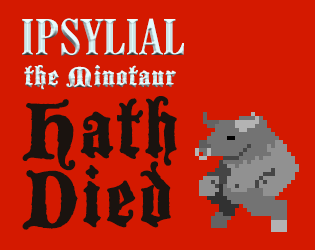
<style>
.page{position:relative;width:315px;height:250px;background:#d41900}
.page>*{position:absolute;margin:0}
.t1{font:50px "CenturySchoolbookW03-BdCnd";letter-spacing:0.025em;color:#def9fc}
.t2{font:30.5px "1BlackmoorLETPlain10";letter-spacing:0.025em;color:#def9fc}
.t3{font:86.2px/68.9px "1BlackmoorLETPlain10";letter-spacing:0.025em;color:#1a130f}
</style>
<div class="page">
<p class="t1" style="left:22px;top:18px;width:162px;height:38px">IPSYLIAL</p>
<p class="t2" style="left:24px;top:65px;width:152px;height:25px">the Minotaur</p>
<p class="t3" style="left:22px;top:96px;width:155px;height:134px">Hath<br>Died</p>
</div>
